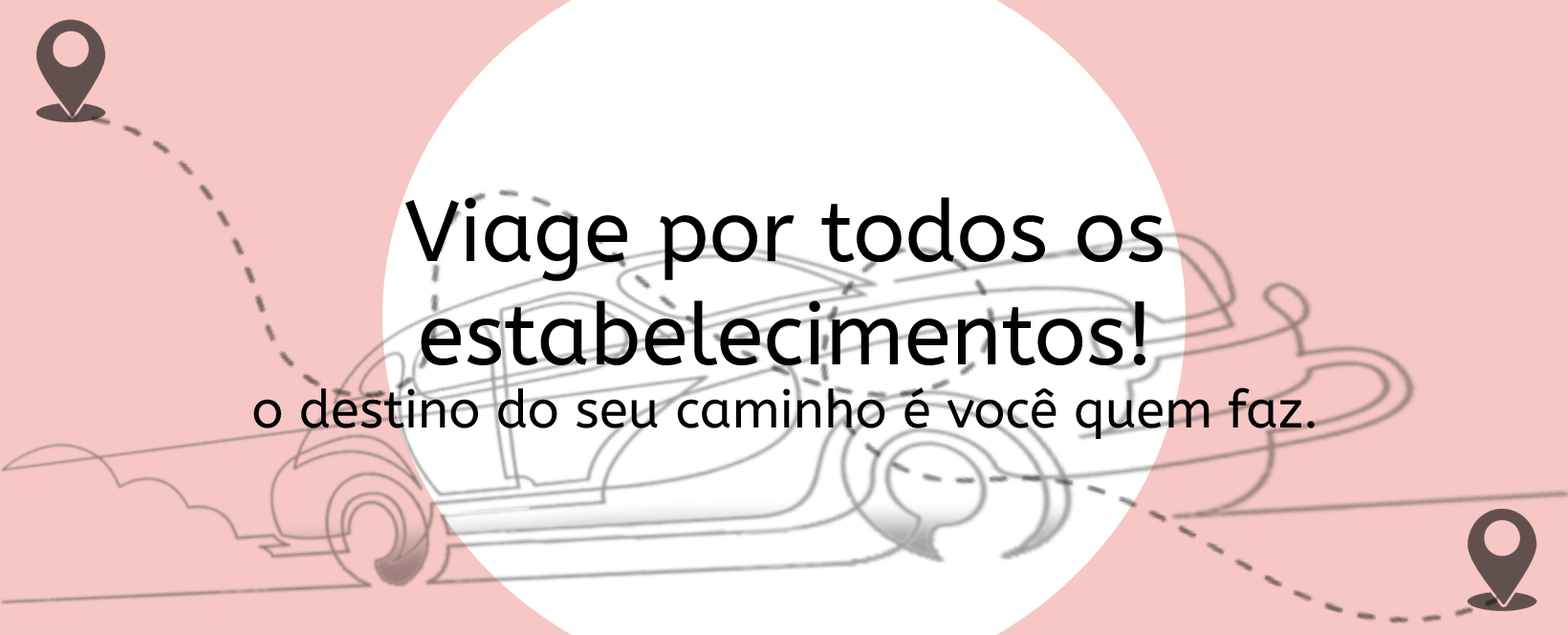
<style>
.page{position:relative;width:1568px;height:635px;background:#f6c7c4}
.page>*{position:absolute;margin:0}
.t1{font:52.5px "ABeeZee-Regular";color:#000000}
.t2{font:86.1px "ABeeZee-Regular";color:#000000}
</style>
<div class="page">
<p class="t1" style="left:253px;top:197px;width:1062px;height:242px;text-align:center"><span class="t2">Viage por todos os <br>estabelecimentos!<br></span>o destino do seu caminho é você quem faz.</p>
</div>
